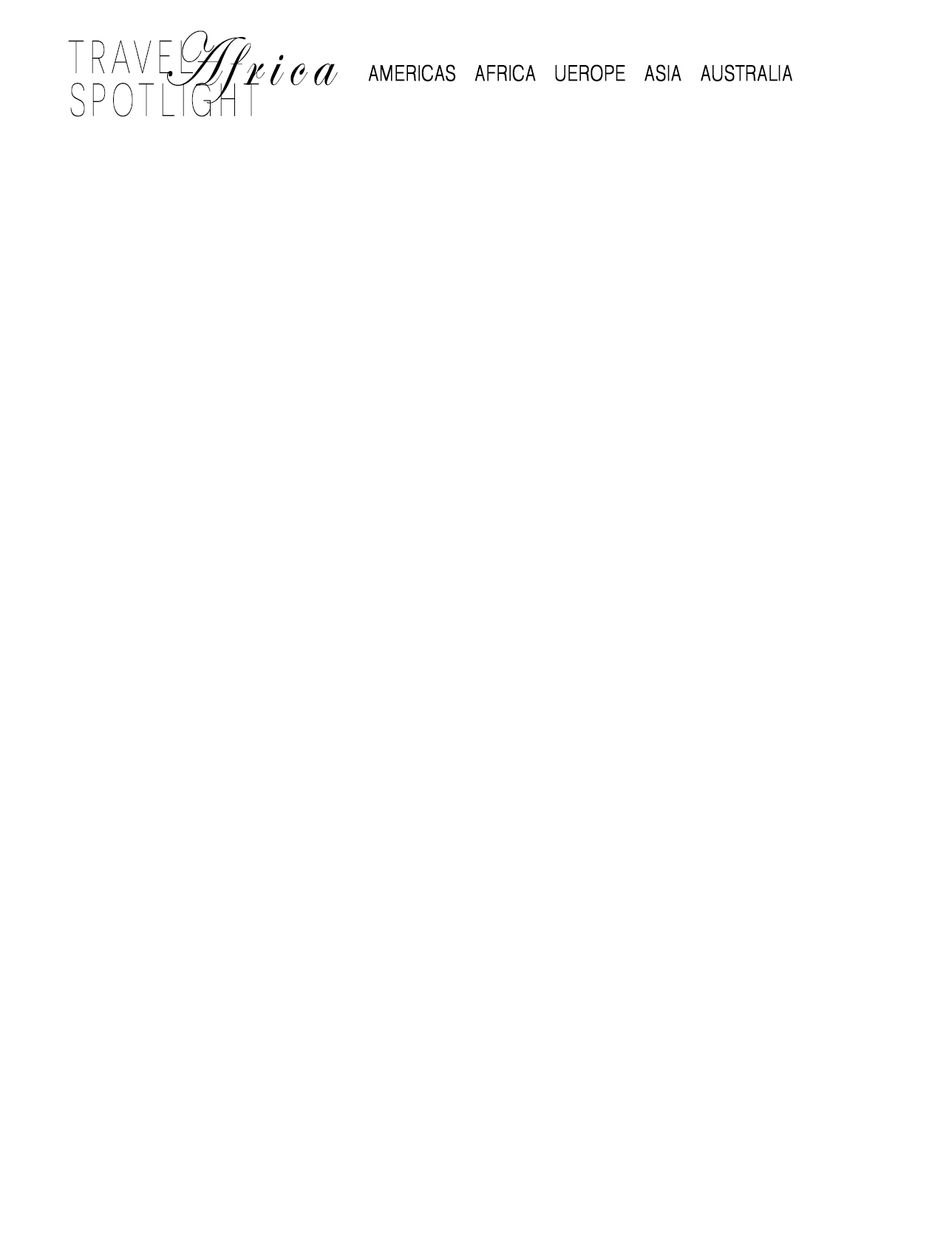
<style>
.page{position:relative;width:946px;height:1260px;background:#ffffff}
.page>*{position:absolute;margin:0}
.t1{font:46.8px "iCielNovecentosans-ExtraLight";letter-spacing:0.15em;color:#000000;scale:0.68 1}
.t2{font:78px "EdwardianScriptITC";letter-spacing:0.15em;color:#000000;scale:0.77 1}
.t3{font:21.6px "CATIA-Symbols";letter-spacing:-0.03em;color:#000000;font-weight:bold;scale:0.85 1}
</style>
<div class="page">
<p class="t1" style="left:68px;top:40px;width:125px;height:33px">TRAVEL</p>
<p class="t2" style="left:167px;top:30px;width:171px;height:74px">Africa</p>
<p class="t3" style="left:368px;top:64px;width:425px;height:17px">AMERICAS    AFRICA    UEROPE    ASIA    AUSTRALIA</p>
<p class="t1" style="left:70px;top:83px;width:190px;height:34px">SPOTLIGHT</p>
</div>
